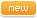
<style>
.page{position:relative;width:37px;height:18px}
.page>*{position:absolute;margin:0}
.t1{font:8px "PFTempestaSeven";color:#fefefe}
</style>
<div class="page">
<p class="t1" style="left:9px;top:6px;width:19px;height:5px">new</p>
</div>
